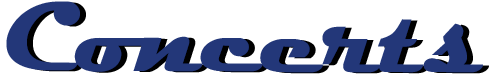
<style>
.page{position:relative;width:489px;height:75px;background:#ffffff}
.page>*{position:absolute;margin:0}
.t1{font:100px "Magneto-Bold";color:#233779}
</style>
<div class="page">
<p class="t1" style="left:6px;top:1px;width:477px;height:72px">Concerts</p>
<p class="t1" style="left:12px;top:2px;width:477px;height:72px">Concerts</p>
</div>
